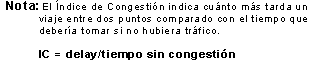
<style>
.page{position:relative;width:330px;height:72px;background:#ffffff}
.page>*{position:absolute;margin:0}
.t1{font:12px "Arial-BoldMT";letter-spacing:0.075em;color:#000000}
.t2{font:10px/12px "ArialMT";letter-spacing:0.075em;color:#000000}
.t3{font:11px/12px "Arial-BoldMT";letter-spacing:0.075em;color:#000000}
</style>
<div class="page">
<p class="t1" style="left:6px;top:1px;width:32px;height:9px">Nota:</p>
<p class="t2" style="left:39px;top:0px;width:268px;height:60px">El Índice de Congestión indica cuánto más tarda un <br>viaje entre dos puntos comparado con el tiempo que <br>debería tomar si no hubiera tráfico.<br><br><span class="t3">IC = delay/tiempo sin congestión</span></p>
</div>
